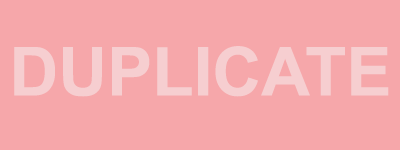
<style>
.page{position:relative;width:400px;height:150px;background:#f6a7aa}
.page>*{position:absolute;margin:0}
.t1{font:116px "Arial-BoldMT";color:#f6ced0}
</style>
<div class="page">
<p class="t1" style="left:14px;top:46px;width:375px;height:51px">DUPLICATE</p>
</div>
